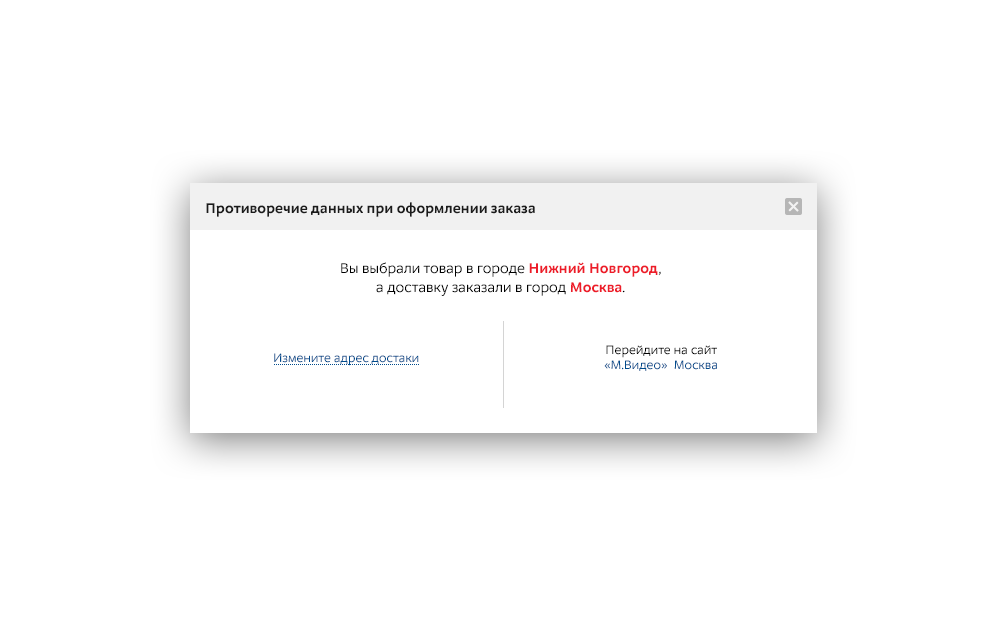
<style>
.page{position:relative;width:1007px;height:630px;background:#ffffff}
.page>*{position:absolute;margin:0}
.t1{font:15px "M.Video-Bold";color:#1b1b1b}
.t2{font:15px/19px "M.Video-Regular";color:#000000}
.t3{font:15px/19px "M.Video-Bold";color:#ed1c29}
.t4{font:13px "M.Video-Regular";color:#004b8c}
.t5{font:13px/15px "M.Video-Regular";color:#000000}
.t6{font:13px/15px "M.Video-Regular";color:#004b8c}
</style>
<div class="page">
<p class="t1" style="left:206px;top:202px;width:329px;height:15px">Противоречие данных при оформлении заказа</p>
<p class="t2" style="left:341px;top:262px;width:320px;height:34px;text-align:center">Вы выбрали товар в городе <span class="t3">Нижний Новгород</span>,<br>а доставку заказали в город <span class="t3">Москва</span>.</p>
<p class="t4" style="left:274px;top:353px;width:145px;height:13px">Измените адрес достаки</p>
<p class="t5" style="left:604px;top:345px;width:113px;height:26px;text-align:center">Перейдите на сайт<br><span class="t6">«М.Видео»  Москва</span></p>
</div>
